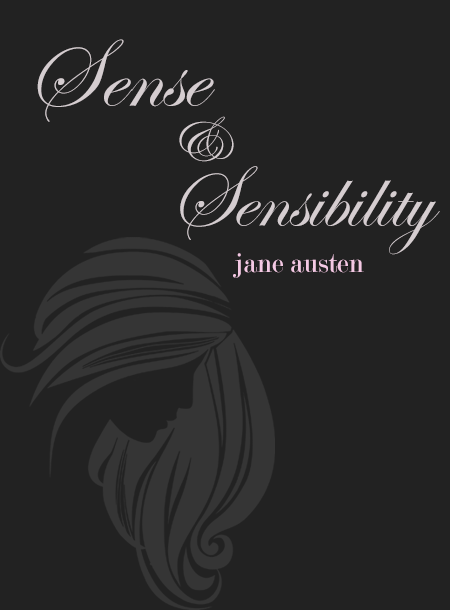
<style>
.page{position:relative;width:450px;height:610px;background:#222222}
.page>*{position:absolute;margin:0}
.t1{font:99.5px "EdwardianScriptITC";color:#d5cdd0}
.t2{font:67.5px "EdwardianScriptITC";color:#d5cdd0}
.t3{font:89.5px "EdwardianScriptITC";color:#d5cdd0}
.t4{font:28.4px "Modern-Regular";color:#f4c9e4}
</style>
<div class="page">
<p class="t1" style="left:37px;top:39px;width:178px;height:83px">Sense</p>
<p class="t2" style="left:179px;top:116px;width:55px;height:46px">&amp;</p>
<p class="t3" style="left:180px;top:166px;width:260px;height:89px">Sensibility</p>
<p class="t4" style="left:233px;top:253px;width:131px;height:25px">jane austen</p>
</div>
